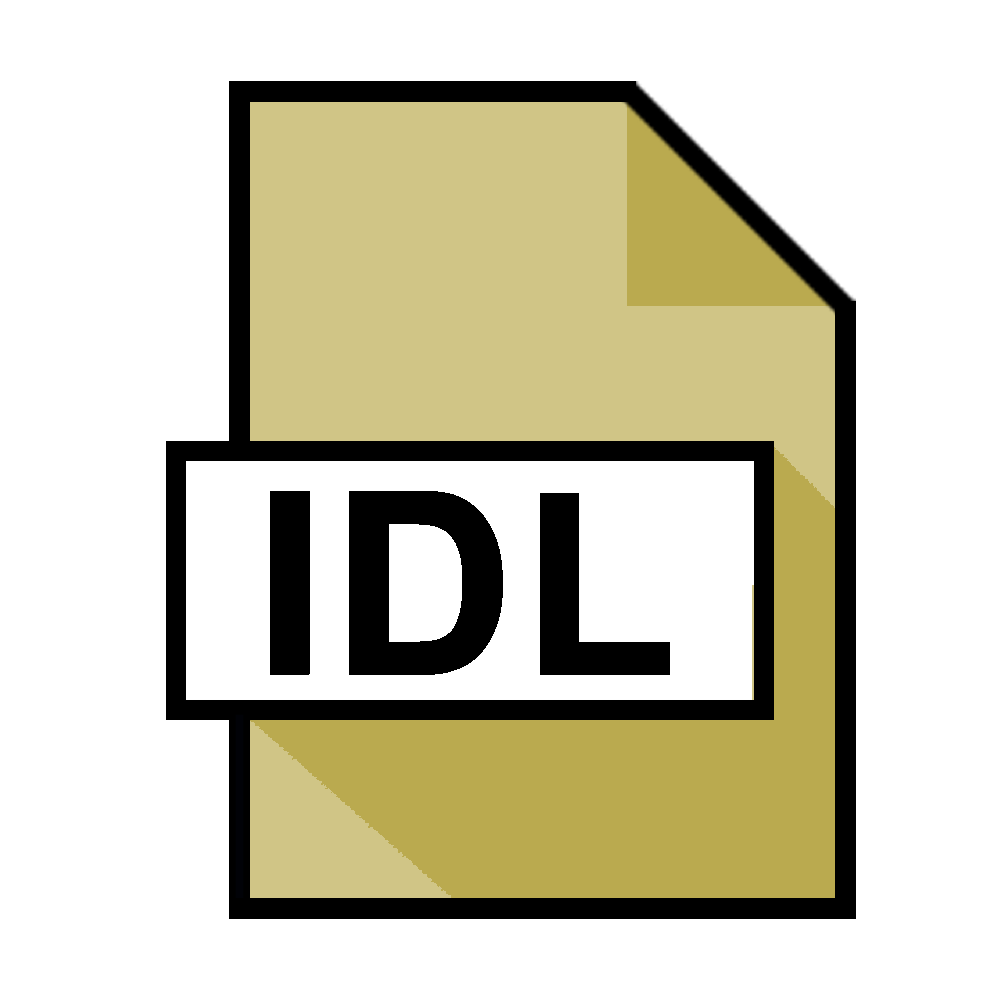
<style>
.page{position:relative;width:1000px;height:1000px;background:#ffffff}
.page>*{position:absolute;margin:0}
.t1{font:253.9px "Arial-BoldMT";color:#000000;font-weight:bold}
</style>
<div class="page">
<p class="t1" style="left:270px;top:491px;width:400px;height:184px">IDL</p>
</div>
